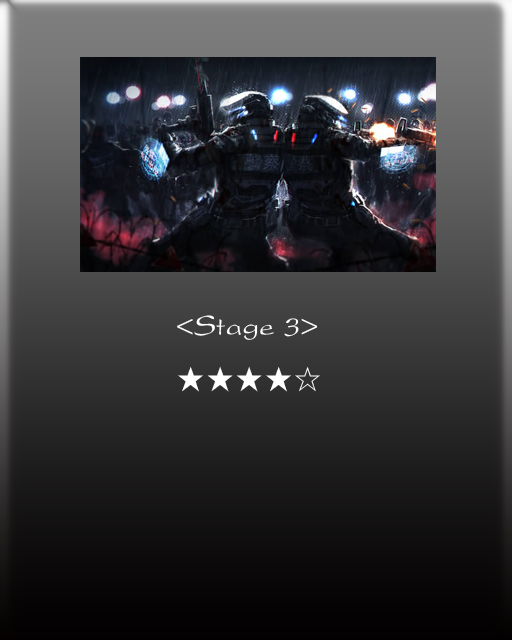
<style>
.page{position:relative;width:512px;height:640px}
.page>*{position:absolute;margin:0}
.t1{font:30px "Yj-NANCHO-Medium";color:#ffffff}
</style>
<div class="page">
<p class="t1" style="left:177px;top:315px;width:143px;height:77px">&lt;Stage 3&gt;<br>★★★★☆</p>
</div>
